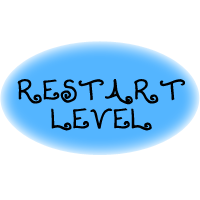
<style>
.page{position:relative;width:200px;height:200px;background:#ffffff}
.page>*{position:absolute;margin:0}
.t1{font:24px "Lollipop";color:#000000}
</style>
<div class="page">
<p class="t1" style="left:17px;top:79px;width:168px;height:52px;text-align:center">RESTART<br>LEVEL</p>
</div>
